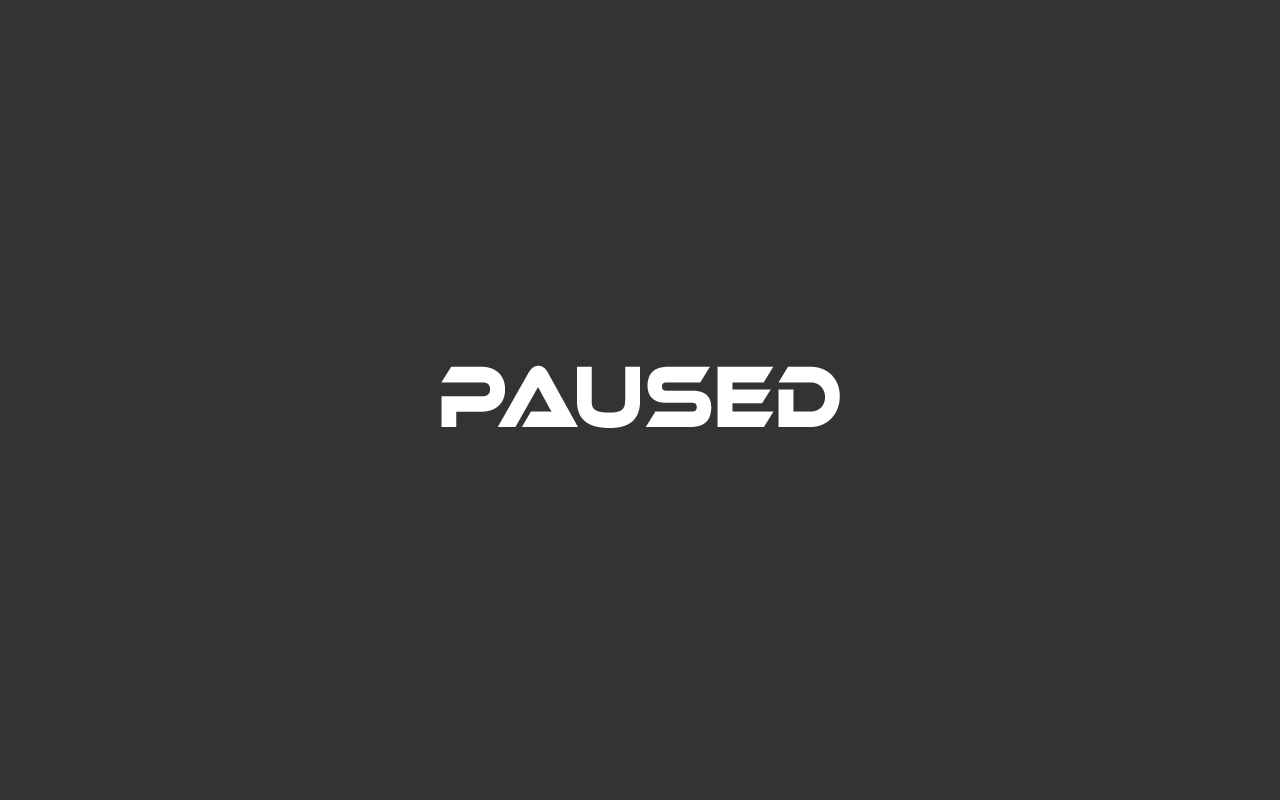
<style>
.page{position:relative;width:1280px;height:800px;background:#333333}
.page>*{position:absolute;margin:0}
.t1{font:90px "EthnocentricRg-Regular";color:#ffffff;scale:0.8 1}
</style>
<div class="page">
<p class="t1" style="left:441px;top:365px;width:399px;height:63px">PAUSED</p>
</div>
